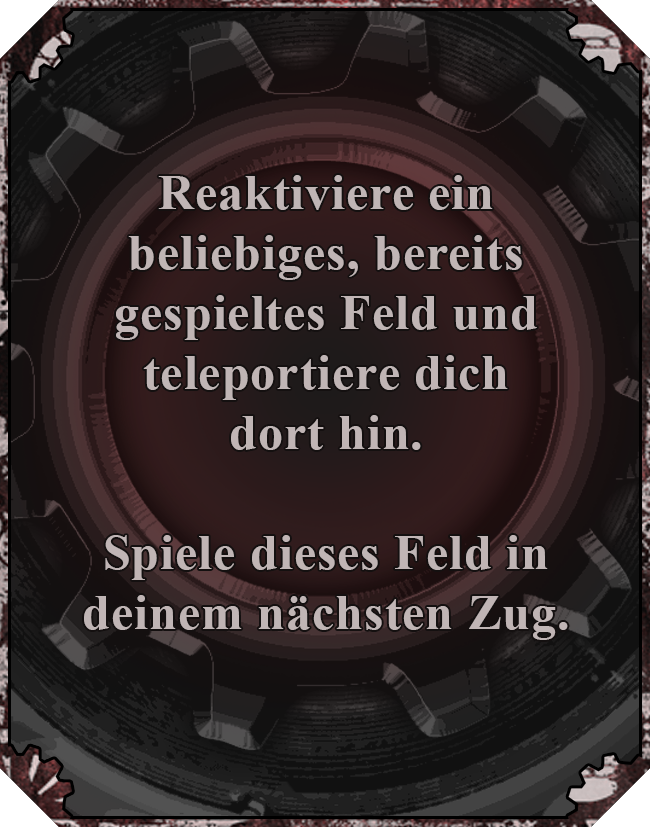
<style>
.page{position:relative;width:650px;height:827px}
.page>*{position:absolute;margin:0}
.t1{font:50px "TimesNewRomanPS-BoldMT";letter-spacing:0.02em;color:#c0b5b5}
</style>
<div class="page">
<p class="t1" style="left:84px;top:175px;width:484px;height:465px;text-align:center">Reaktiviere ein beliebiges, bereits gespieltes Feld und teleportiere dich<br>dort hin.<br><br>Spiele dieses Feld in <br>deinem nächsten Zug.</p>
</div>
